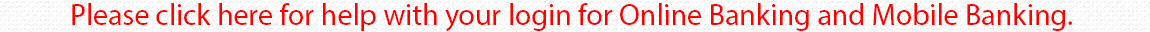
<style>
.page{position:relative;width:1150px;height:32px;background:#ffffff}
.page>*{position:absolute;margin:0}
.t1{font:30px "MyriadPro-Regular";color:#ff0000}
</style>
<div class="page">
<p class="t1" style="left:72px;top:3px;width:1000px;height:29px">Please click here for help with your login for Online Banking and Mobile Banking.</p>
</div>
